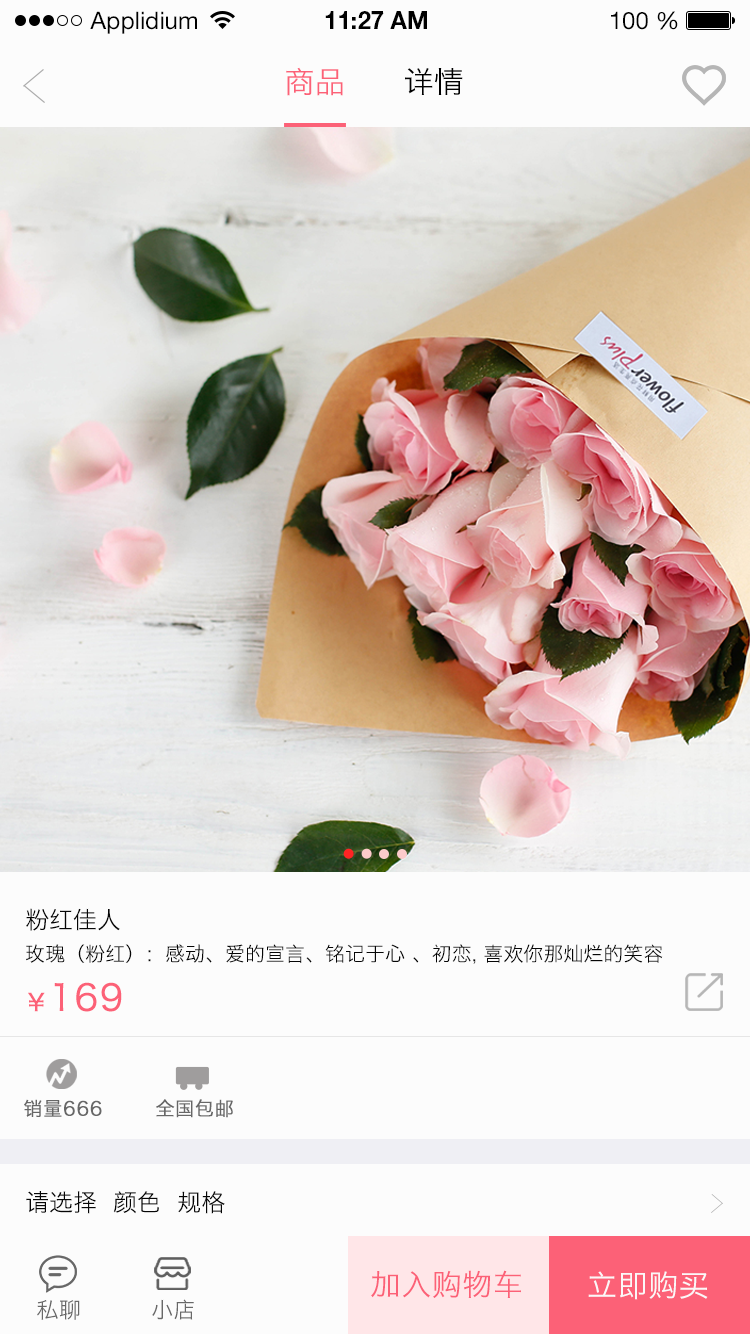
<style>
.page{position:relative;width:750px;height:1334px;background:#fcfcfc}
.page>*{position:absolute;margin:0}
.t1{font:24px "HelveticaNeueLTStd-Roman";color:#000000}
.t2{font:24px "HelveticaNeueLTStd-Bd";color:#000000}
.t3{font:30px "HiraginoSansGB-W3";letter-spacing:0.02em;color:#fc6177}
.t4{font:30px "HiraginoSansGB-W3";letter-spacing:0.02em;color:#000000}
.t5{font:20px/36px "HiraginoSansGB-W3";color:#060606}
.t6{font:24px/36px "HiraginoSansGB-W3";color:#060606}
.t7{font:36px "HiraginoSansGB-W3";letter-spacing:0.02em;color:#fc6177;font-weight:bold}
.t8{font:24px "HiraginoSansGB-W3";letter-spacing:0.02em;color:#fc6177;font-weight:bold}
.t9{font:19px "HiraginoSansGB-W3";letter-spacing:0.02em;color:#676767;font-weight:bold}
.t10{font:24px "HiraginoSansGB-W3";color:#060606}
.t11{font:30.2px "HiraginoSansGB-W3";letter-spacing:0.02em;color:#fbf7f8}
.t12{font:22px "HiraginoSansGB-W3";letter-spacing:0.02em;color:#676767}
.t13{font:22.1px "HiraginoSansGB-W3";letter-spacing:0.02em;color:#676767}
</style>
<div class="page">
<p class="t1" style="left:90px;top:11px;width:107px;height:23px">Applidium</p>
<p class="t2" style="left:325px;top:11px;width:102px;height:18px">11:27 AM</p>
<p class="t1" style="left:611px;top:11px;width:67px;height:19px">100 %</p>
<p class="t3" style="left:286px;top:67px;width:57px;height:29px">商品</p>
<p class="t4" style="left:405px;top:68px;width:58px;height:27px">详情</p>
<p class="t5" style="left:26px;top:908px;width:637px;height:56px"><span class="t6">粉红佳人  <br></span>玫瑰（粉红）：感动、爱的宣言、铭记于心 、初恋, 喜欢你那灿烂的笑容</p>
<p class="t7" style="left:28px;top:982px;width:94px;height:30px"><span class="t8">￥</span>169</p>
<p class="t9" style="left:24px;top:1099px;width:78px;height:18px">销量666</p>
<p class="t9" style="left:156px;top:1099px;width:77px;height:19px">全国包邮</p>
<p class="t10" style="left:26px;top:1191px;width:199px;height:23px">请选择  颜色  规格</p>
<p class="t3" style="left:371px;top:1270px;width:150px;height:28px">加入购物车</p>
<p class="t11" style="left:588px;top:1271px;width:120px;height:29px">立即购买</p>
<p class="t12" style="left:37px;top:1300px;width:43px;height:20px">私聊</p>
<p class="t13" style="left:152px;top:1299px;width:42px;height:21px">小店</p>
</div>
